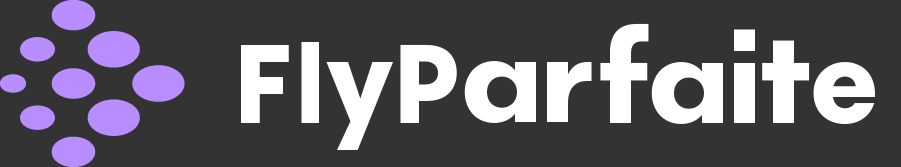
<style>
.page{position:relative;width:901px;height:167px;background:#333333}
.page>*{position:absolute;margin:0}
.t1{font:135px "FONTSPRINGDEMO-Lightbox21Bold";color:#ffffff}
.t2{font:111.9px "FONTSPRINGDEMO-Lightbox21Bold";letter-spacing:0.06em;color:#ffffff}
.t3{font:110.7px "FONTSPRINGDEMO-Lightbox21Bold";letter-spacing:0.06em;color:#ffffff}
.t4{font:124px "FONTSPRINGDEMO-Lightbox21Bold";letter-spacing:0.06em;color:#ffffff}
</style>
<div class="page">
<p class="t1" style="left:600px;top:23px;width:275px;height:101px">faite</p>
<p class="t2" style="left:241px;top:45px;width:48px;height:78px">F</p>
<p class="t3" style="left:301px;top:42px;width:18px;height:81px">l</p>
<p class="t2" style="left:400px;top:44px;width:57px;height:79px">P</p>
<p class="t4" style="left:326px;top:62px;width:67px;height:88px">y</p>
<p class="t1" style="left:464px;top:61px;width:128px;height:62px">ar</p>
</div>
